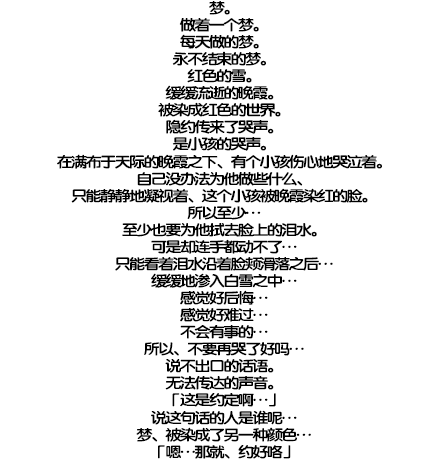
<style>
.page{position:relative;width:440px;height:476px;background:#ffffff}
.page>*{position:absolute;margin:0}
.t1{font:14.7px/17.1px "FZY4K--GBK1-0";letter-spacing:-0.13em;color:#000000;scale:1.14 1}
</style>
<div class="page">
<p class="t1" style="left:57px;top:1px;width:325px;height:458px;text-align:center">梦。<br>做着一个梦。<br>每天做的梦。<br>永不结束的梦。<br>红色的雪。<br>缓缓流逝的晚霞。<br>被染成红色的世界。<br>隐约传来了哭声。<br>是小孩的哭声。<br>在满布于天际的晚霞之下、有个小孩伤心地哭泣着。<br>自己没办法为他做些什么、<br>只能静静地凝视着、这个小孩被晚霞染红的脸。<br>所以至少…<br>至少也要为他拭去脸上的泪水。<br>可是却连手都动不了…<br>只能看着泪水沿着脸颊滑落之后…<br>缓缓地渗入白雪之中…<br>感觉好后悔…<br>感觉好难过…<br>不会有事的…<br>所以、不要再哭了好吗…<br>说不出口的话语。<br>无法传达的声音。<br>「这是约定啊…」<br>说这句话的人是谁呢…<br>梦、被染成了另一种颜色…<br>「嗯…那就、约好咯」</p>
</div>
